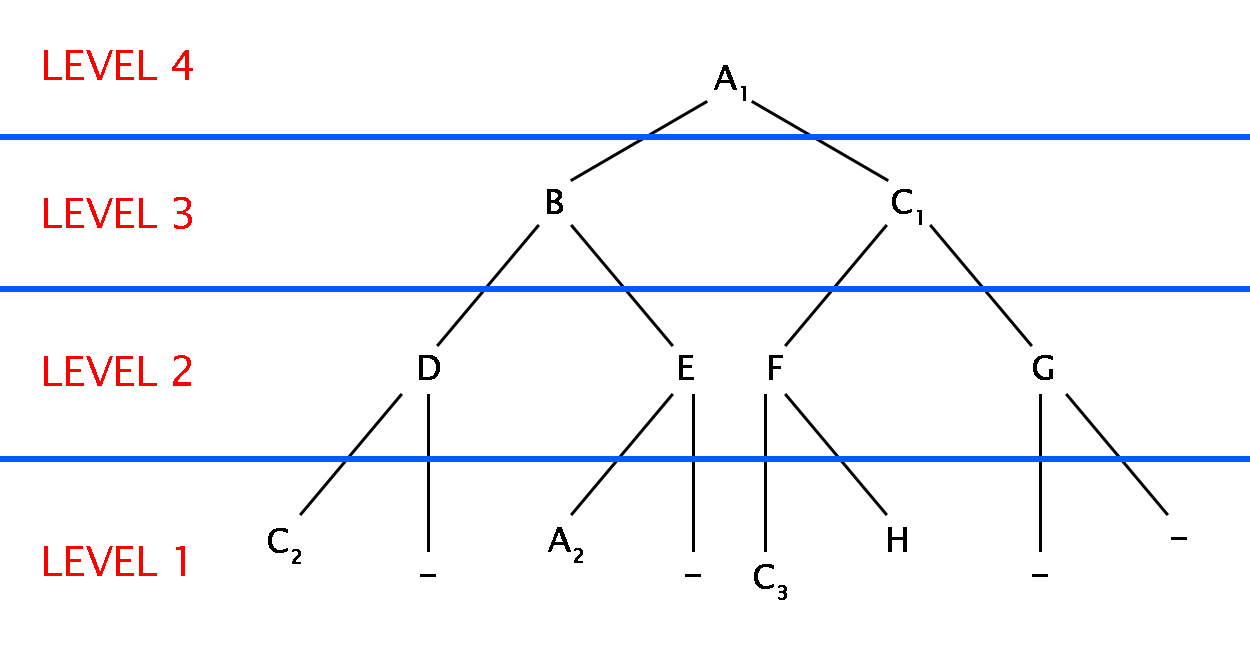
<style>
.page{position:relative;width:1250px;height:660px;background:#ffffff}
.page>*{position:absolute;margin:0}
.t1{font:41.7px "LucidaSansUnicode";color:#ff0000}
.t2{font:12px "LucidaSansUnicode";color:#000000;font-weight:bold}
</style>
<div class="page">
<p class="t1" style="left:44px;top:50px;width:149px;height:30px">LEVEL 4</p>
<p class="t2" style="left:714px;top:65px;width:32px;height:36px;text-align:center">A1</p>
<p class="t1" style="left:44px;top:197px;width:148px;height:32px">LEVEL 3</p>
<p class="t2" style="left:547px;top:189px;width:16px;height:25px;text-align:center">B</p>
<p class="t2" style="left:892px;top:189px;width:30px;height:36px;text-align:center">C1</p>
<p class="t1" style="left:44px;top:355px;width:147px;height:31px">LEVEL 2</p>
<p class="t2" style="left:419px;top:355px;width:21px;height:25px;text-align:center">D</p>
<p class="t2" style="left:679px;top:355px;width:15px;height:25px;text-align:center">E</p>
<p class="t2" style="left:769px;top:355px;width:14px;height:25px;text-align:center">F</p>
<p class="t2" style="left:1033px;top:355px;width:20px;height:25px;text-align:center">G</p>
<p class="t2" style="left:268px;top:528px;width:33px;height:36px;text-align:center">C2</p>
<p class="t2" style="left:548px;top:527px;width:35px;height:36px;text-align:center">A2</p>
<p class="t2" style="left:888px;top:527px;width:19px;height:25px;text-align:center">H</p>
<p class="t1" style="left:44px;top:546px;width:141px;height:30px">LEVEL 1</p>
<p class="t2" style="left:754px;top:564px;width:33px;height:36px;text-align:center">C3</p>
</div>
